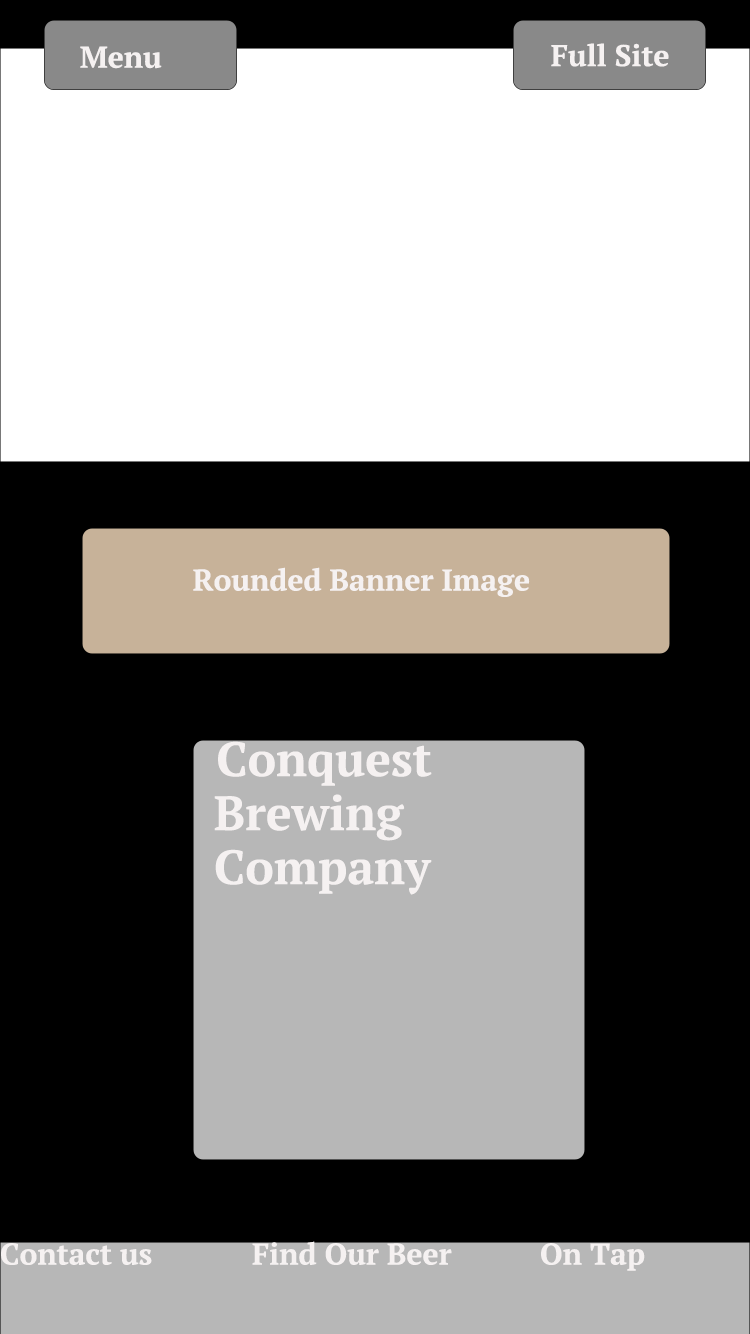
<style>
.page{position:relative;width:750px;height:1334px;background:#000000}
.page>*{position:absolute;margin:0}
.t1{font:30px "PTSerif-Bold";color:#f5f1f1}
.t2{font:48px/18px "PTSerif-Bold";color:#f5f1f1}
</style>
<div class="page">
<p class="t1" style="left:80px;top:46px;width:82px;height:23px">Menu</p>
<p class="t1" style="left:551px;top:43px;width:118px;height:24px">Full Site</p>
<p class="t1" style="left:193px;top:567px;width:337px;height:30px">Rounded Banner Image</p>
<p class="t2" style="left:214px;top:741px;width:218px;height:154px">Conquest<br><br><br>Brewing<br><br><br>Company</p>
<p class="t1" style="left:1px;top:1241px;width:644px;height:30px">Contact us   Find Our Beer   On Tap</p>
</div>
